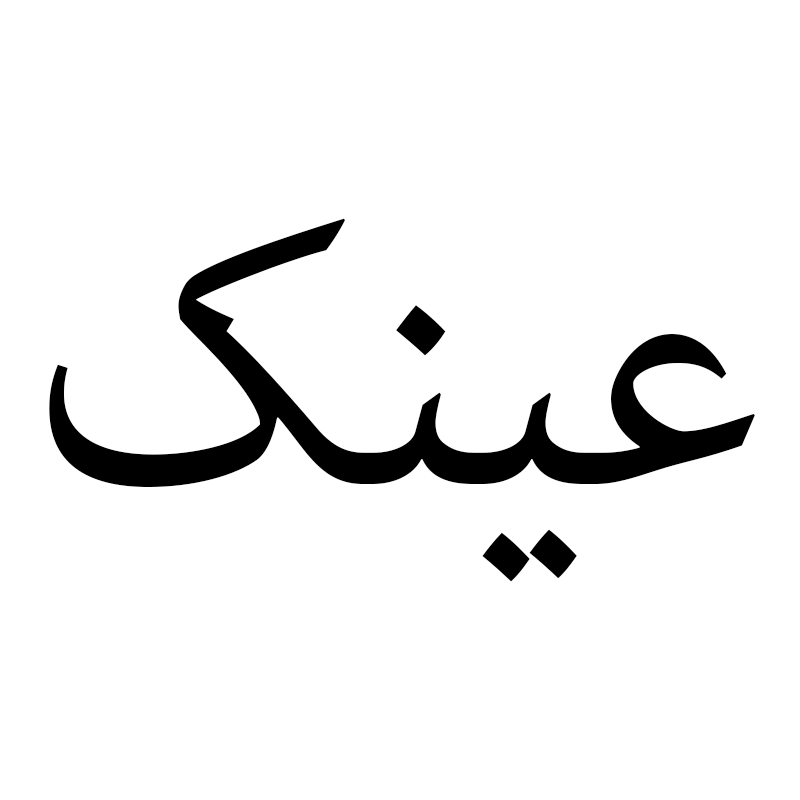
<style>
.page{position:relative;width:800px;height:800px;background:#ffffff}
.page>*{position:absolute;margin:0}
.t1{font:500px "AdobeArabic-Regular";color:#000000}
</style>
<div class="page">
<p class="t1" style="left:49px;top:218px;width:706px;height:364px">عینک</p>
</div>
